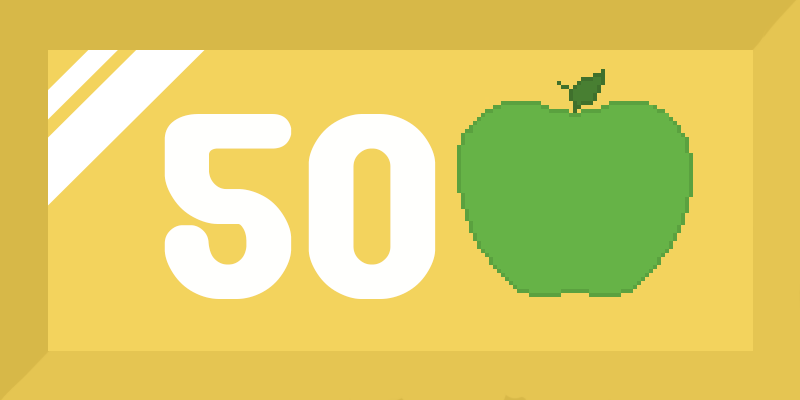
<style>
.page{position:relative;width:800px;height:400px;background:#f3d35d}
.page>*{position:absolute;margin:0}
.t1{font:226.2px "Round_Pop";color:#fffffe}
</style>
<div class="page">
<p class="t1" style="left:164px;top:114px;width:272px;height:185px">50</p>
</div>
